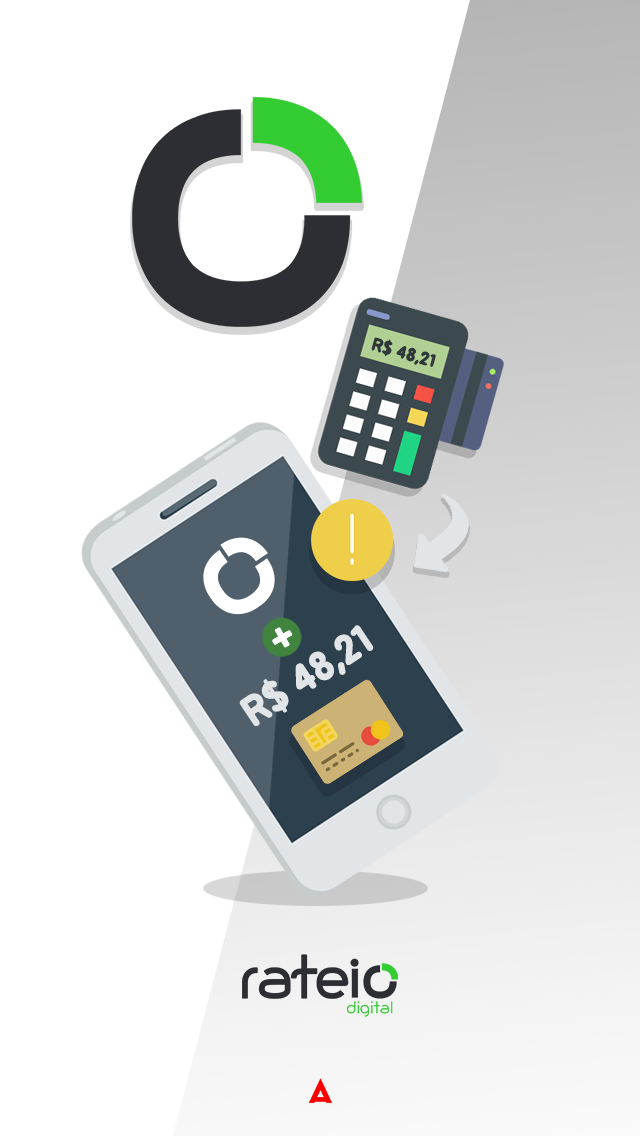
<style>
.page{position:relative;width:640px;height:1136px;background:#ffffff}
.page>*{position:absolute;margin:0}
.t1{font:17.3px "BPreplay-Bold";color:#2e373a}
.t2{font:38.8px "BPreplay-Bold";color:#e2e5e7}
</style>
<div class="page">
<p class="t1" style="left:371px;top:337px;width:65px;height:30px;rotate:16deg">R$ 48,21</p>
<p class="t2" style="left:239px;top:625px;width:135px;height:101px;rotate:-33deg">R$ 48,21</p>
</div>
